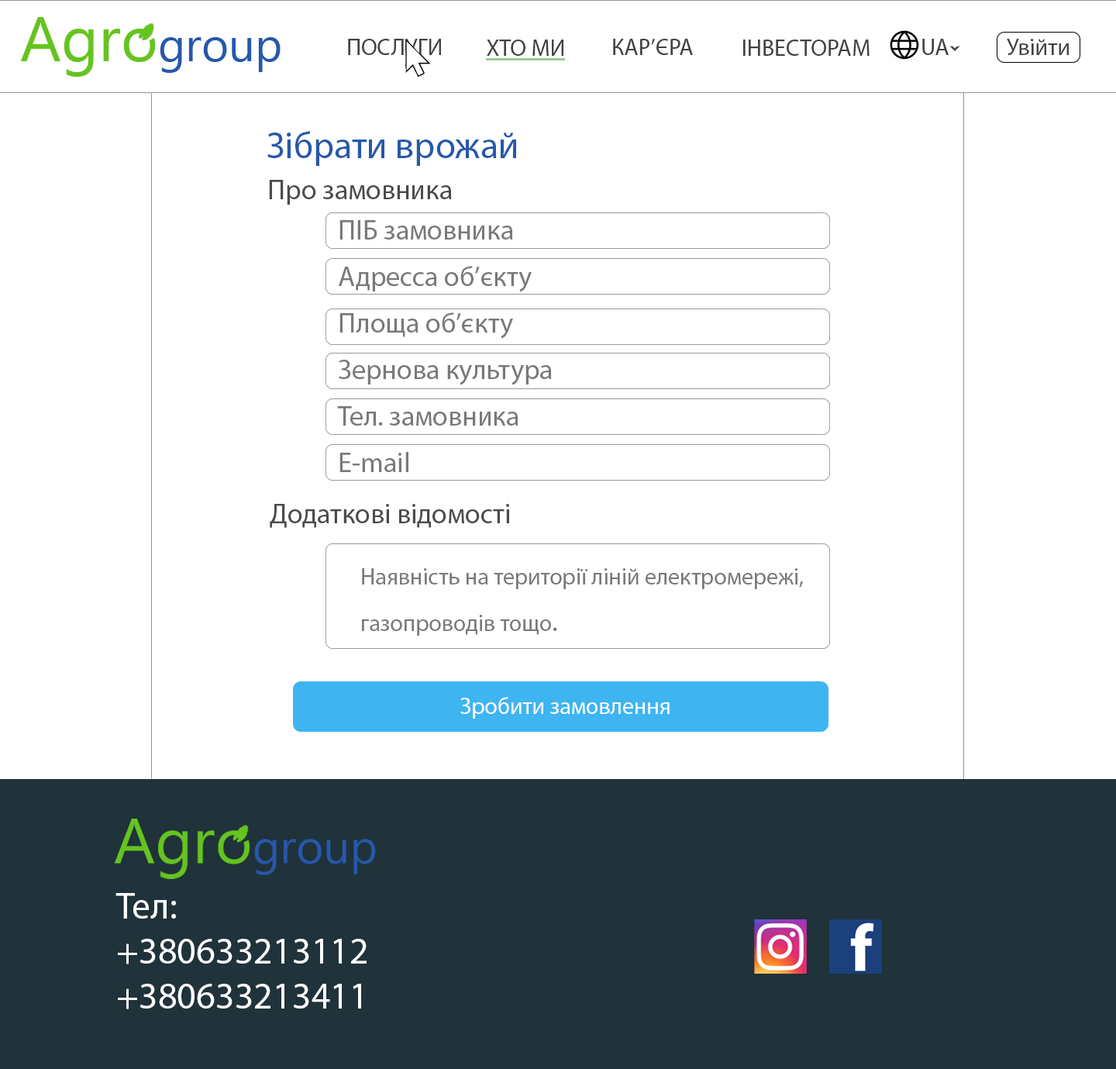
<style>
.page{position:relative;width:1116px;height:1069px;background:#ffffff}
.page>*{position:absolute;margin:0}
.t1{font:23.2px "MyriadPro-Regular";color:#424242}
.t2{font:37.2px "MyriadPro-Regular";color:#2658ab}
.t3{font:27.9px "MyriadPro-Regular";color:#4b4b4b}
.t4{font:27.9px/46.5px "MyriadPro-Regular";color:#797979}
.t5{font:23.2px/46.5px "MyriadPro-Regular";color:#797979}
.t6{font:23.2px "MyriadPro-Regular";color:#ffffff}
.t7{font:37.4px "MyriadPro-Regular";color:#ffffff}
</style>
<div class="page">
<p class="t1" style="left:348px;top:39px;width:93px;height:16px">ПОСЛУГИ</p>
<p class="t1" style="left:487px;top:40px;width:76px;height:16px">ХТО МИ</p>
<p class="t1" style="left:613px;top:39px;width:80px;height:16px">КАР’ЄРА</p>
<p class="t1" style="left:743px;top:40px;width:126px;height:16px">ІНВЕСТОРАМ</p>
<p class="t1" style="left:922px;top:39px;width:26px;height:16px">UA</p>
<p class="t1" style="left:1007px;top:39px;width:62px;height:16px">Увійти</p>
<p class="t2" style="left:267px;top:131px;width:249px;height:35px">Зібрати врожай</p>
<p class="t3" style="left:269px;top:180px;width:183px;height:25px">Про замовника</p>
<p class="t4" style="left:337px;top:220px;width:215px;height:252px">ПІБ замовника<br>Адресса об’єкту<br>Площа об’єкту<br>Зернова культура<br>Тел. замовника<br>E-mail</p>
<p class="t3" style="left:270px;top:504px;width:239px;height:24px">Додаткові відомості</p>
<p class="t5" style="left:362px;top:568px;width:441px;height:67px">Наявність на території ліній електромережі, <br>газопроводів тощо<span class="t4">.</span></p>
<p class="t6" style="left:460px;top:697px;width:210px;height:21px">Зробити замовлення</p>
<p class="t7" style="left:115px;top:893px;width:252px;height:116px">Тел:<br>+380633213112<br>+380633213411</p>
</div>
